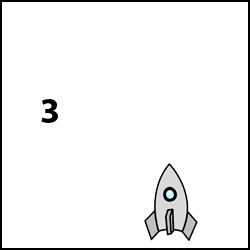
<style>
.page{position:relative;width:250px;height:250px;background:#ffffff}
.page>*{position:absolute;margin:0}
.t1{font:36px "Myriad-Bold";color:#000000}
</style>
<div class="page">
<p class="t1" style="left:41px;top:99px;width:17px;height:24px">3</p>
</div>
